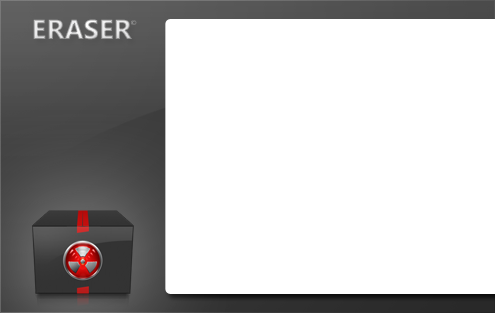
<style>
.page{position:relative;width:495px;height:313px;background:#ffffff}
.page>*{position:absolute;margin:0}
.t1{font:27.5px "SegoeUI-Bold"}
.t2{font:6.9px "SegoeUI-Bold"}
</style>
<div class="page">
<p class="t1" style="left:33px;top:19px;width:99px;height:21px">ERASER</p>
<p class="t2" style="left:131px;top:20px;width:6px;height:5px">©</p>
</div>
